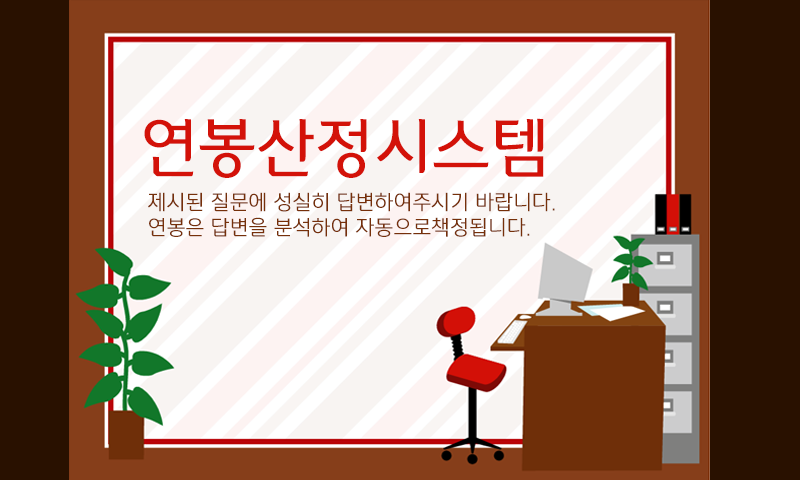
<style>
.page{position:relative;width:800px;height:480px;background:#291100}
.page>*{position:absolute;margin:0}
.t1{font:65px "DakiMTitle";color:#d31209}
.t2{font:21px "DakiM";color:#76300a}
</style>
<div class="page">
<p class="t1" style="left:144px;top:118px;width:400px;height:60px">연봉산정시스템</p>
<p class="t2" style="left:148px;top:192px;width:407px;height:45px">제시된 질문에 성실히 답변하여주시기 바랍니다.<br>연봉은 답변을 분석하여 자동으로책정됩니다.</p>
</div>
